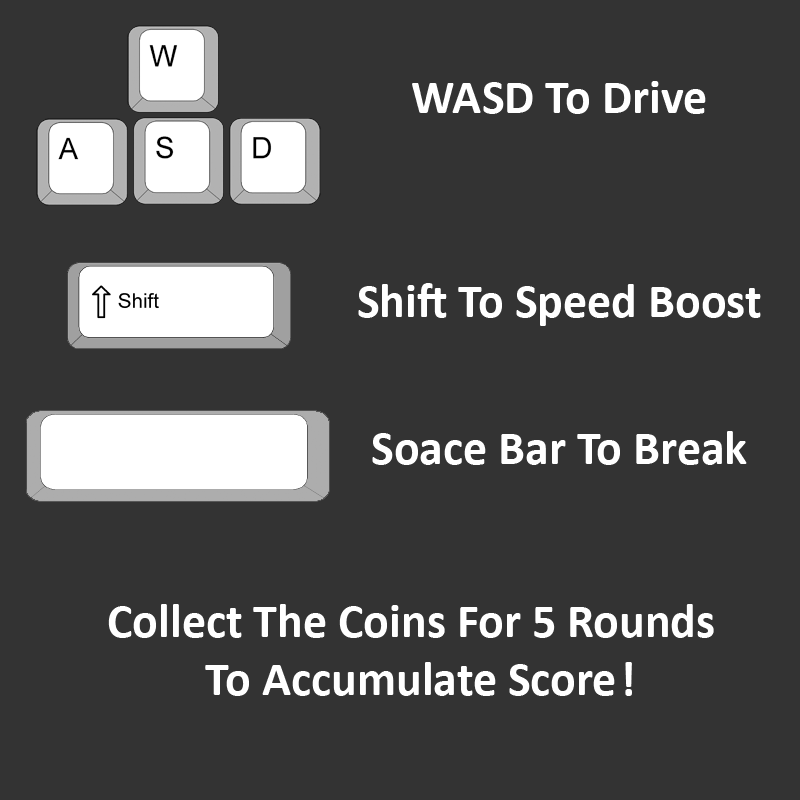
<style>
.page{position:relative;width:800px;height:800px;background:#333333}
.page>*{position:absolute;margin:0}
.t1{font:48px "Calibri-Bold";color:#ffffff}
</style>
<div class="page">
<p class="t1" style="left:412px;top:81px;width:294px;height:33px">WASD To Drive</p>
<p class="t1" style="left:358px;top:283px;width:403px;height:43px">Shift To Speed Boost</p>
<p class="t1" style="left:372px;top:431px;width:375px;height:34px">Soace Bar To Break</p>
<p class="t1" style="left:108px;top:604px;width:606px;height:92px;text-align:center">Collect The Coins For 5 Rounds To Accumulate Score</p>
<p class="t1" style="left:625px;top:662px;width:7px;height:34px">!</p>
</div>
